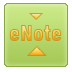
<style>
.page{position:relative;width:72px;height:72px;background:#ffffff}
.page>*{position:absolute;margin:0}
.t1{font:21.9px "Swiss721BT-BlackCondensed"}
</style>
<div class="page">
<p class="t1" style="left:9px;top:25px;width:53px;height:16px">eNote</p>
</div>
